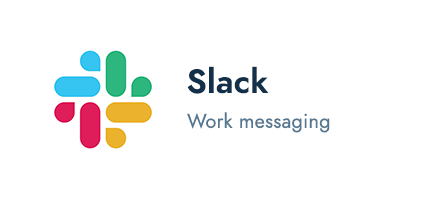
<style>
.page{position:relative;width:430px;height:200px;background:#ffffff}
.page>*{position:absolute;margin:0}
.t1{font:33.3px "Jost-Semi";letter-spacing:0.01em;color:#12304a}
.t2{font:20px "Jost-Book";letter-spacing:0.01em;color:#56778f}
</style>
<div class="page">
<p class="t1" style="left:187px;top:66px;width:82px;height:28px">Slack</p>
<p class="t2" style="left:187px;top:112px;width:143px;height:21px">Work messaging</p>
</div>
